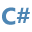
<style>
.page{position:relative;width:32px;height:32px;background:#ffffff}
.page>*{position:absolute;margin:0}
.t1{font:24px "SegoeUI-Bold";color:#4d86b4}
</style>
<div class="page">
<p class="t1" style="left:2px;top:7px;width:28px;height:18px">C#</p>
</div>
